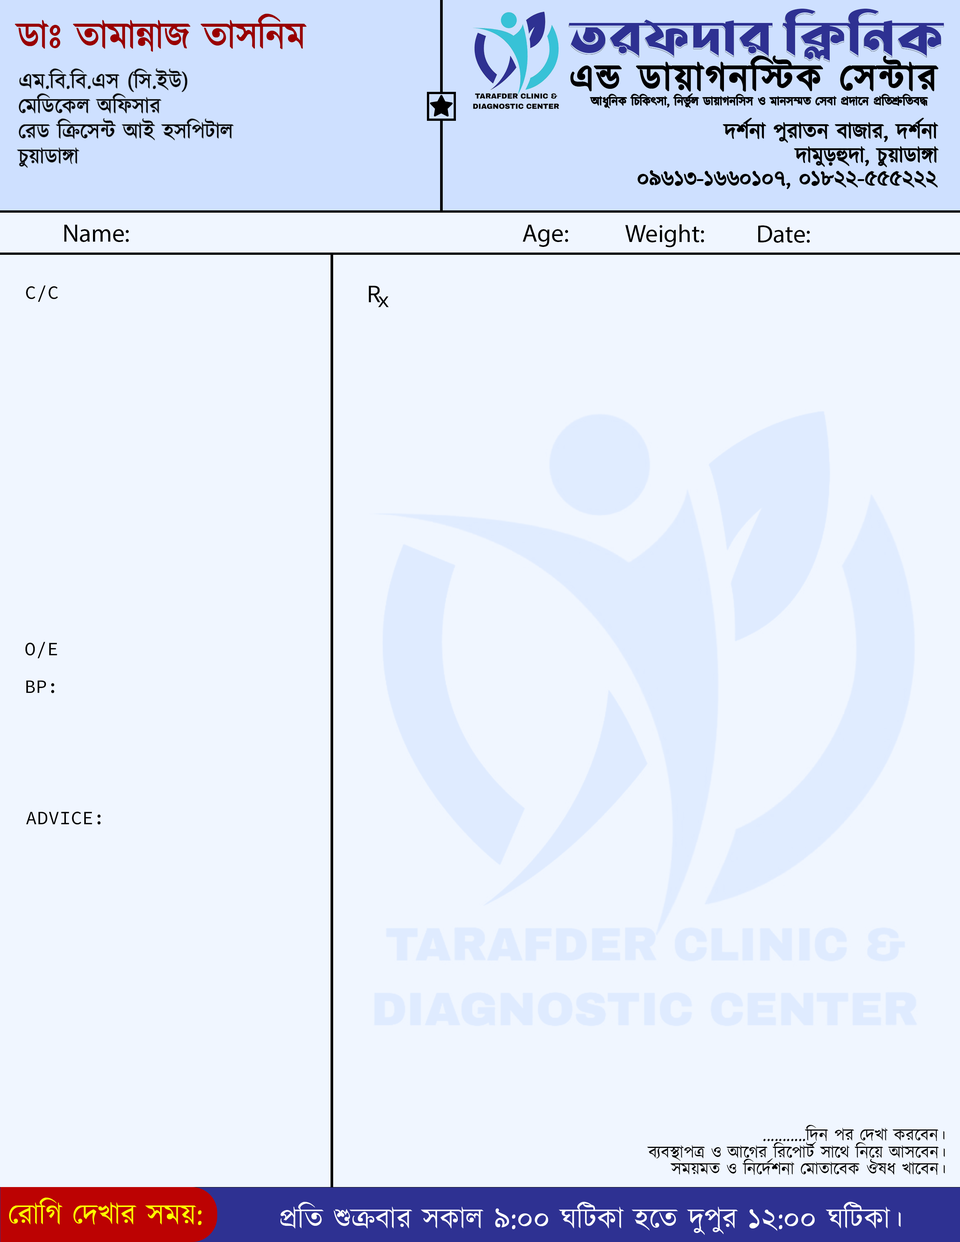
<style>
.page{position:relative;width:960px;height:1242px;background:#f0f6ff}
.page>*{position:absolute;margin:0}
.t1{font:37.6px "Kalpurush";color:#9a0000}
.t2{font:51px "LiSirajeeSheikhPlainUnicode";color:#2e3192}
.t3{font:37.6px "Kalpurush";letter-spacing:0.06em;color:#000000}
.t4{font:22px/25.1px "Kalpurush";color:#000000}
.t5{font:12.5px "Kalpurush";color:#000000}
.t6{font:22px "Kalpurush";color:#000000}
.t7{font:25.1px "MyriadPro-Regular";color:#000000}
.t8{font:18.8px "SourceCodePro-Regular";color:#000000}
.t9{font:25.1px "SourceCodePro-Regular";color:#000000}
.t10{font:22px "SourceCodePro-Regular";color:#000000}
.t11{font:17.3px "Kalpurush";color:#000000}
.t12{font:29.9px "Kalpurush";color:#fcff00}
.t13{font:29.5px "Kalpurush";color:#ffffff}
</style>
<div class="page">
<p class="t1" style="left:15px;top:14px;width:291px;height:38px">ডাঃ তামান্নাজ তাসনিম</p>
<p class="t2" style="left:569px;top:9px;width:375px;height:52px">তরফদার ক্লিনিক</p>
<p class="t3" style="left:571px;top:56px;width:367px;height:35px">এন্ড ডায়াগনস্টিক সেন্টার</p>
<p class="t4" style="left:17px;top:69px;width:217px;height:99px">এম.বি.বি.এস (সি.ইউ)<br>মেডিকেল অফিসার<br>রেড ক্রিসেন্ট আই হসপিটাল<br>চুয়াডাঙ্গা</p>
<p class="t5" style="left:590px;top:94px;width:338px;height:14px">আধুনিক চিকিৎসা, নির্ভুল ডায়াগনসিস ও মানসম্মত সেবা প্রদানে প্রতিশ্রুতিবদ্ধ</p>
<p class="t6" style="left:723px;top:118px;width:215px;height:25px">দর্শনা পুরাতন বাজার, দর্শনা</p>
<p class="t6" style="left:794px;top:146px;width:144px;height:21px">দামুড়হুদা, চুয়াডাঙ্গা</p>
<p class="t6" style="left:638px;top:171px;width:299px;height:18px">০৯৬১৩-১৬৬০১০৭, ০১৮২২-৫৫৫২২২</p>
<p class="t7" style="left:64px;top:225px;width:65px;height:17px">Name:</p>
<p class="t7" style="left:522px;top:225px;width:46px;height:22px">Age:</p>
<p class="t7" style="left:625px;top:224px;width:79px;height:23px">Weight:</p>
<p class="t7" style="left:758px;top:225px;width:52px;height:18px">Date:</p>
<p class="t8" style="left:26px;top:285px;width:32px;height:17px">C/C</p>
<p class="t9" style="left:369px;top:286px;width:11px;height:16px">R</p>
<p class="t10" style="left:378px;top:296px;width:11px;height:12px">x</p>
<p class="t8" style="left:25px;top:642px;width:32px;height:16px">O/E</p>
<p class="t8" style="left:26px;top:681px;width:28px;height:12px">BP:</p>
<p class="t8" style="left:26px;top:812px;width:75px;height:13px">ADVICE:</p>
<p class="t11" style="left:763px;top:1125px;width:181px;height:16px">...........দিন পর দেখা করবেন।</p>
<p class="t11" style="left:647px;top:1142px;width:298px;height:19px">ব্যবস্থাপত্র ও আগের রিপোর্ট সাথে নিয়ে আসবেন।</p>
<p class="t11" style="left:670px;top:1159px;width:275px;height:16px">সময়মত ও নির্দেশনা মোতাবেক ঔষধ খাবেন।</p>
<p class="t12" style="left:9px;top:1198px;width:193px;height:27px">রোগি দেখার সময়:</p>
<p class="t13" style="left:280px;top:1202px;width:621px;height:33px">প্রতি শুক্রবার সকাল ৯:০০ ঘটিকা হতে দুপুর ১২:০০ ঘটিকা।</p>
</div>
